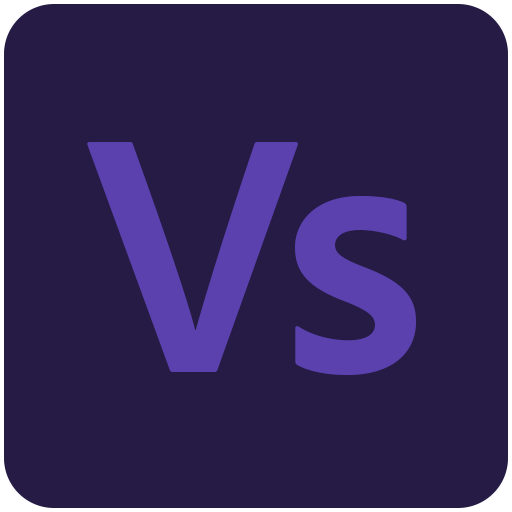
<style>
.page{position:relative;width:512px;height:512px;background:#251b45}
.page>*{position:absolute;margin:0}
.t1{font:350px "AdobeClean-Bold";color:#5b41ae}
</style>
<div class="page">
<p class="t1" style="left:87px;top:142px;width:329px;height:234px">Vs</p>
</div>
